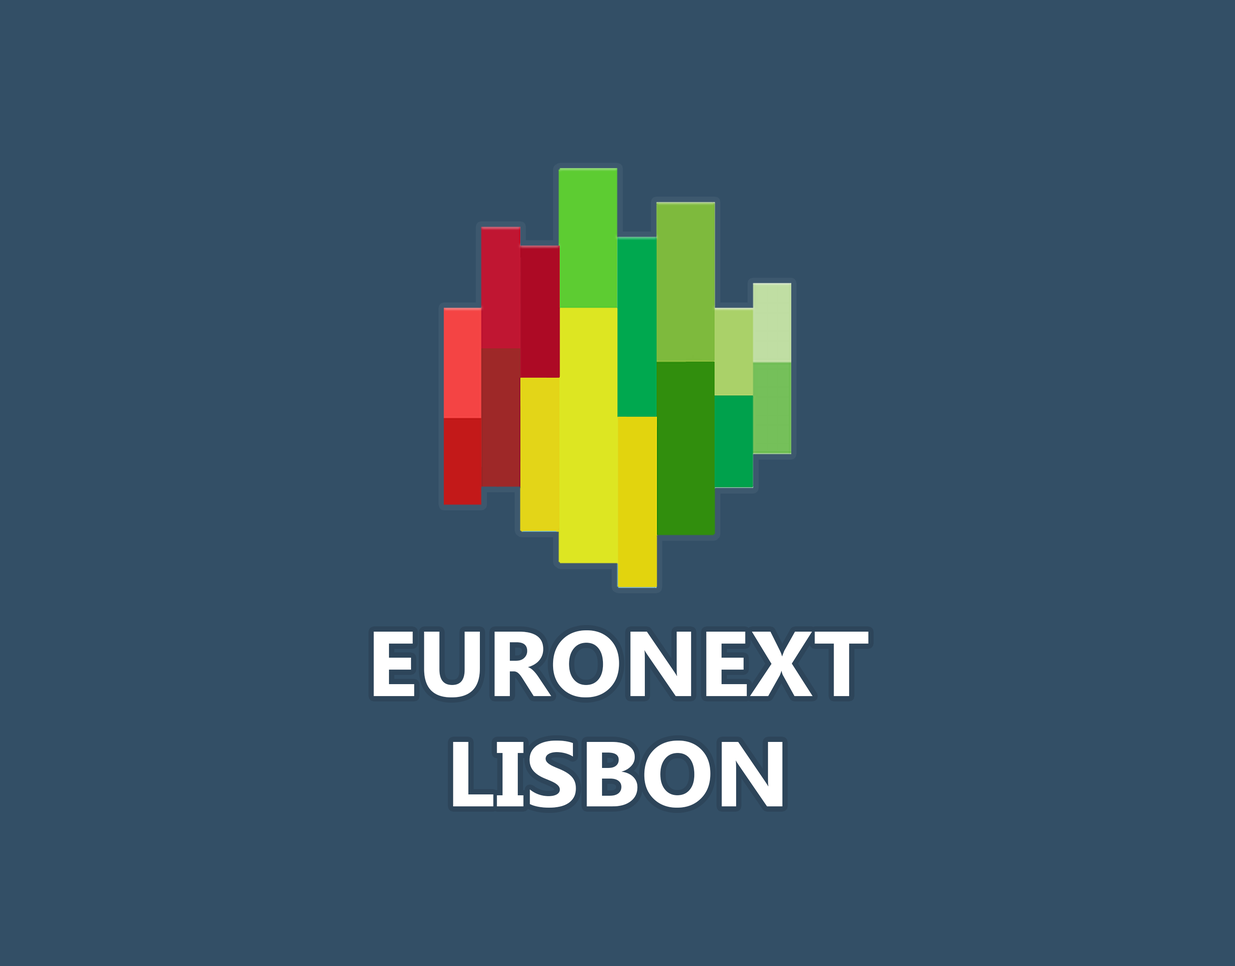
<style>
.page{position:relative;width:1235px;height:966px;background:#334f66}
.page>*{position:absolute;margin:0}
.t1{font:91.7px "MyanmarText-Bold";color:#ffffff;scale:1.05 1}
</style>
<div class="page">
<p class="t1" style="left:374px;top:630px;width:494px;height:177px;text-align:center">EURONEXT<br>LISBON</p>
</div>
